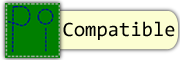
<style>
.page{position:relative;width:180px;height:60px;background:#fcfed2}
.page>*{position:absolute;margin:0}
.t1{font:20.6px "Consolas";color:#000000}
</style>
<div class="page">
<p class="t1" style="left:63px;top:21px;width:112px;height:19px">Compatible</p>
</div>
